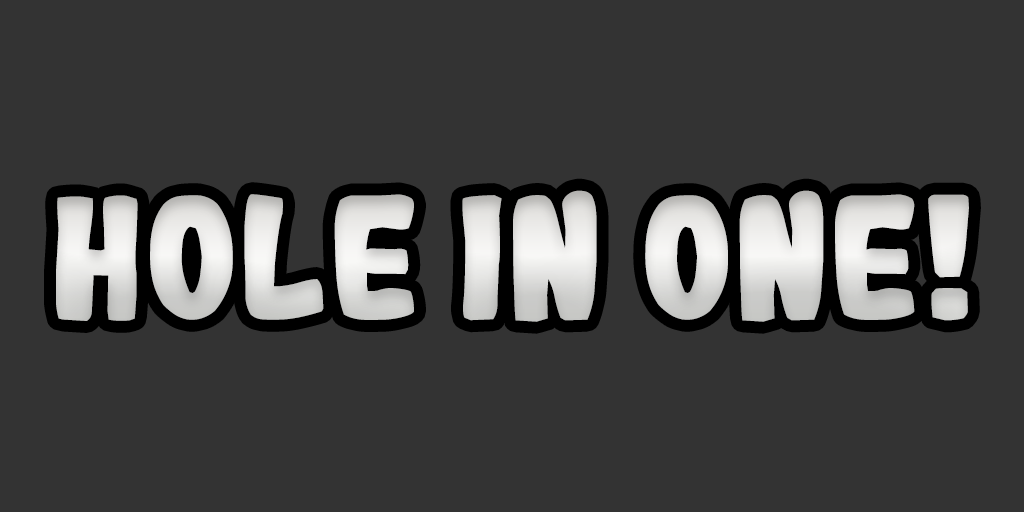
<style>
.page{position:relative;width:1024px;height:512px;background:#333333}
.page>*{position:absolute;margin:0}
.t1{font:166.7px "Gogono-Cocoa-Mochi"}
</style>
<div class="page">
<p class="t1" style="left:56px;top:190px;width:913px;height:132px">HOLE IN ONE!</p>
</div>
